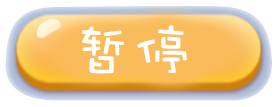
<style>
.page{position:relative;width:278px;height:107px;background:#ffffff}
.page>*{position:absolute;margin:0}
.t1{font:60px "DFWaWaSC-W5";color:#ffffff}
</style>
<div class="page">
<p class="t1" style="left:81px;top:25px;width:106px;height:49px">暂停</p>
</div>
